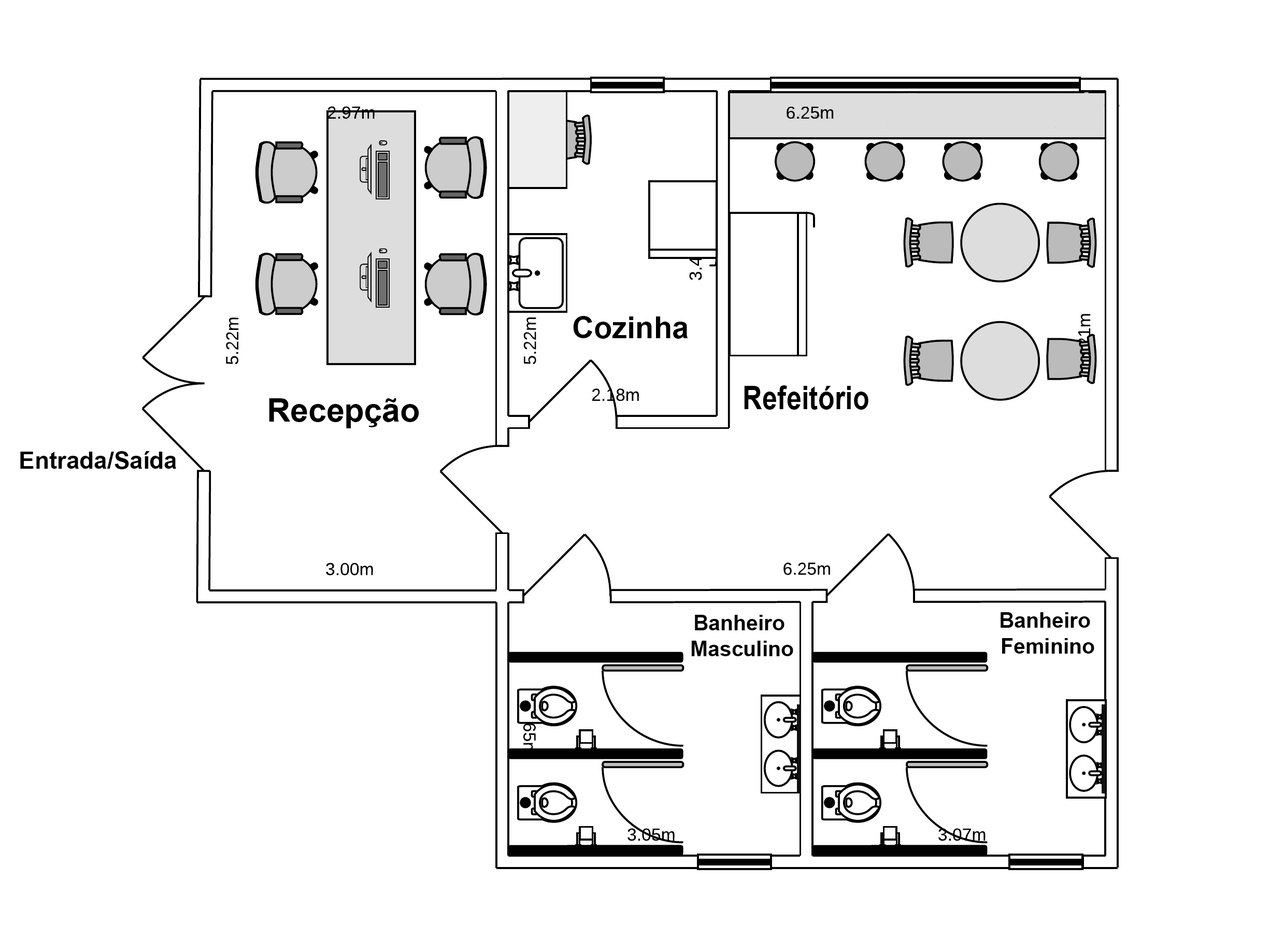
<style>
.page{position:relative;width:1270px;height:939px;background:#ffffff}
.page>*{position:absolute;margin:0}
.t1{font:30.7px "Arial-BoldMT";color:#000000}
.t2{font:32.2px "Arial-BoldMT";color:#000000;scale:0.84 1}
.t3{font:32.4px "Arial-BoldMT";color:#000000}
.t4{font:23.7px "Arial-BoldMT";color:#000000}
.t5{font:21.3px "Arial-BoldMT";color:#000000}
</style>
<div class="page">
<p class="t1" style="left:573px;top:316px;width:115px;height:23px">Cozinha</p>
<p class="t2" style="left:744px;top:385px;width:124px;height:25px">Refeitório</p>
<p class="t3" style="left:269px;top:398px;width:150px;height:30px">Recepção</p>
<p class="t4" style="left:20px;top:451px;width:156px;height:18px">Entrada/Saída</p>
<p class="t5" style="left:691px;top:615px;width:102px;height:41px;text-align:center">Banheiro <br>Masculino</p>
<p class="t5" style="left:1000px;top:612px;width:94px;height:42px;text-align:center">Banheiro <br>Feminino</p>
</div>
